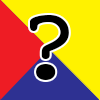
<style>
.page{position:relative;width:100px;height:100px;background:#fff200}
.page>*{position:absolute;margin:0}
.t1{font:106.5px "Courier";color:#000000}
</style>
<div class="page">
<p class="t1" style="left:30px;top:15px;width:39px;height:65px">?</p>
</div>
